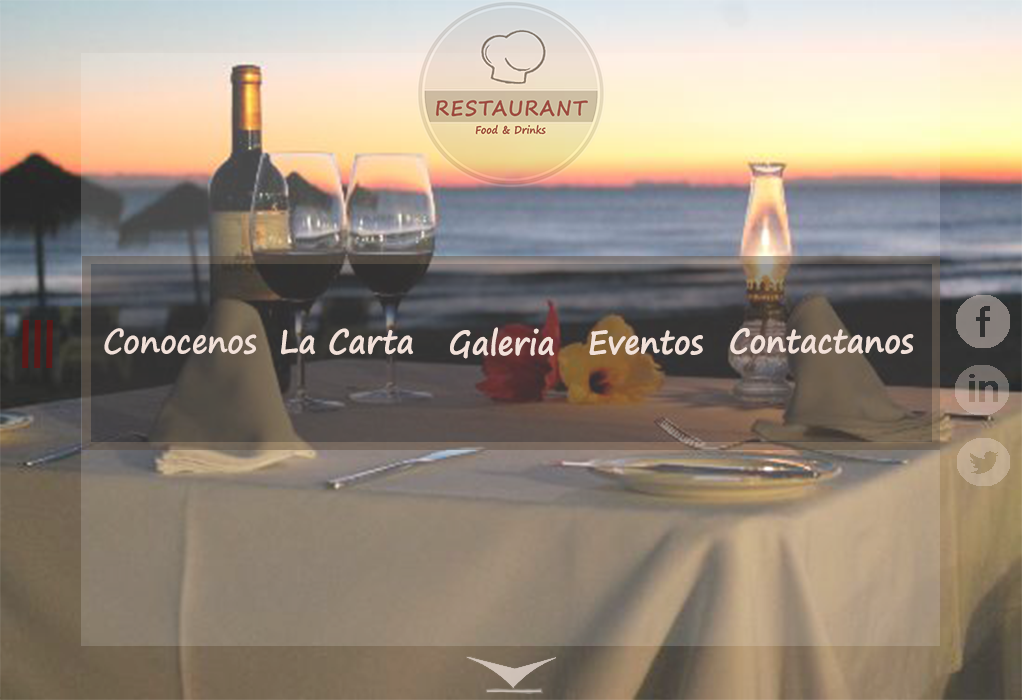
<style>
.page{position:relative;width:1022px;height:700px}
.page>*{position:absolute;margin:0}
.t1{font:33px "SegoePrint-Bold";color:#f1e0d8;scale:0.91 1}
</style>
<div class="page">
<p class="t1" style="left:104px;top:328px;width:153px;height:27px">Conocenos</p>
<p class="t1" style="left:281px;top:328px;width:133px;height:27px">La Carta</p>
<p class="t1" style="left:450px;top:327px;width:105px;height:32px">Galeria</p>
<p class="t1" style="left:730px;top:328px;width:184px;height:27px">Contactanos</p>
<p class="t1" style="left:589px;top:330px;width:114px;height:25px">Eventos</p>
</div>
